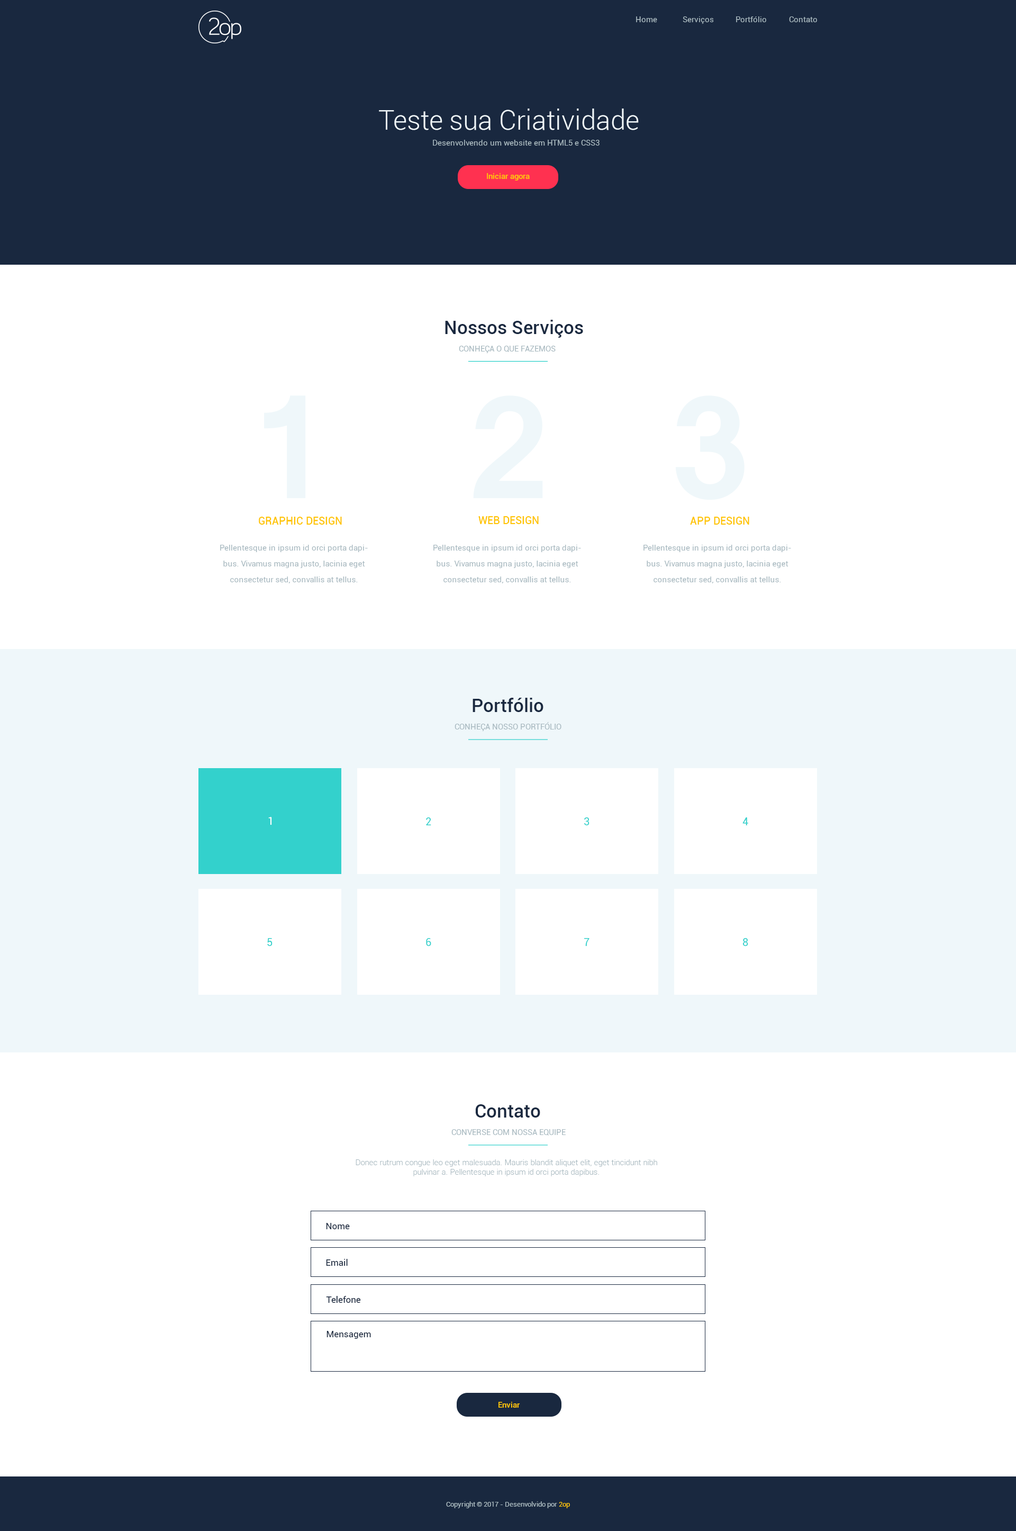
<style>
.page{position:relative;width:1016px;height:1531px;background:#ffffff}
.page>*{position:absolute;margin:0}
.t1{font:7.9px "Roboto-Regular";color:#a8b9c0}
.t2{font:27.1px "Roboto-Light";color:#f0f8fb}
.t3{font:7.9px "Roboto-Medium";color:#ffc501}
.t4{font:18.5px "Roboto-Medium";color:#1a2940}
.t5{font:10.6px "Roboto-Medium";color:#ffc501}
.t6{font:7.9px/15.9px "Roboto-Regular";color:#a8b9c0}
.t7{font:10.6px "Roboto-Regular";color:#ffffff}
.t8{font:10.6px "Roboto-Regular";color:#33d1cc}
.t9{font:7.9px "Roboto-Light";color:#a8b9c0}
.t10{font:9px "Roboto-Regular";color:#19283f}
.t11{font:6.9px "Roboto-Regular";color:#a8b9c0}
.t12{font:6.9px "Roboto-Regular";color:#ffc501}
</style>
<div class="page">
<p class="t1" style="left:636px;top:16px;width:22px;height:6px">Home</p>
<p class="t1" style="left:683px;top:16px;width:31px;height:8px">Serviços</p>
<p class="t1" style="left:736px;top:16px;width:31px;height:6px">Portfólio</p>
<p class="t1" style="left:789px;top:16px;width:28px;height:6px">Contato</p>
<p class="t2" style="left:379px;top:109px;width:260px;height:21px">Teste sua Criatividade</p>
<p class="t1" style="left:433px;top:140px;width:167px;height:6px">Desenvolvendo um website em HTML5 e CSS3</p>
<p class="t3" style="left:487px;top:173px;width:43px;height:8px">Iniciar agora</p>
<p class="t4" style="left:445px;top:320px;width:138px;height:18px">Nossos Serviços</p>
<p class="t1" style="left:459px;top:346px;width:97px;height:7px">CONHEÇA O QUE FAZEMOS</p>
<p class="t5" style="left:259px;top:517px;width:83px;height:8px">GRAPHIC DESIGN</p>
<p class="t5" style="left:479px;top:516px;width:60px;height:8px">WEB DESIGN</p>
<p class="t5" style="left:690px;top:517px;width:60px;height:8px">APP DESIGN</p>
<p class="t6" style="left:220px;top:545px;width:148px;height:38px;text-align:center">Pellentesque in ipsum id orci porta dapibus. Vivamus magna justo, lacinia eget consectetur sed, convallis at tellus.</p>
<p class="t6" style="left:434px;top:545px;width:147px;height:38px;text-align:center">Pellentesque in ipsum id orci porta dapibus. Vivamus magna justo, lacinia eget consectetur sed, convallis at tellus.</p>
<p class="t6" style="left:644px;top:545px;width:147px;height:38px;text-align:center">Pellentesque in ipsum id orci porta dapibus. Vivamus magna justo, lacinia eget consectetur sed, convallis at tellus.</p>
<p class="t4" style="left:473px;top:698px;width:71px;height:14px">Portfólio</p>
<p class="t1" style="left:455px;top:722px;width:107px;height:9px">CONHEÇA NOSSO PORTFÓLIO</p>
<p class="t7" style="left:268px;top:817px;width:4px;height:8px">1</p>
<p class="t8" style="left:426px;top:817px;width:5px;height:8px">2</p>
<p class="t8" style="left:584px;top:817px;width:6px;height:8px">3</p>
<p class="t8" style="left:743px;top:817px;width:6px;height:8px">4</p>
<p class="t8" style="left:267px;top:938px;width:6px;height:8px">5</p>
<p class="t8" style="left:426px;top:938px;width:5px;height:8px">6</p>
<p class="t8" style="left:584px;top:938px;width:6px;height:8px">7</p>
<p class="t8" style="left:743px;top:938px;width:6px;height:8px">8</p>
<p class="t4" style="left:475px;top:1104px;width:66px;height:14px">Contato</p>
<p class="t1" style="left:452px;top:1129px;width:114px;height:7px">CONVERSE COM NOSSA EQUIPE</p>
<p class="t9" style="left:356px;top:1159px;width:302px;height:17px;text-align:center">Donec rutrum congue leo eget malesuada. Mauris blandit aliquet elit, eget tincidunt nibh pulvinar a. Pellentesque in ipsum id orci porta dapibus.</p>
<p class="t10" style="left:326px;top:1223px;width:24px;height:6px">Nome</p>
<p class="t10" style="left:326px;top:1259px;width:22px;height:7px">Email</p>
<p class="t10" style="left:326px;top:1296px;width:35px;height:7px">Telefone</p>
<p class="t10" style="left:327px;top:1331px;width:44px;height:8px">Mensagem</p>
<p class="t3" style="left:499px;top:1402px;width:21px;height:6px">Enviar</p>
<p class="t11" style="left:446px;top:1501px;width:124px;height:7px">Copyright © 2017 - Desenvolvido por <span class="t12">2op</span></p>
</div>
